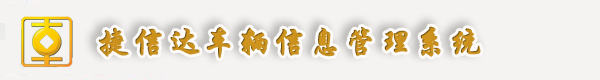
<style>
.page{position:relative;width:600px;height:80px;background:#f4f3f1}
.page>*{position:absolute;margin:0}
.t1{font:32.7px "STXingkai";letter-spacing:0.05em;color:#d0951d;font-weight:bold}
</style>
<div class="page">
<p class="t1" style="left:98px;top:26px;width:383px;height:33px">捷信达车辆信息管理系统</p>
</div>
